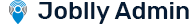
<style>
.page{position:relative;width:192px;height:25px;background:#ffffff}
.page>*{position:absolute;margin:0}
.t1{font:24.3px "Rubik-Medium";color:#051b34}
</style>
<div class="page">
<p class="t1" style="left:38px;top:2px;width:151px;height:22px">Joblly Admin</p>
</div>
